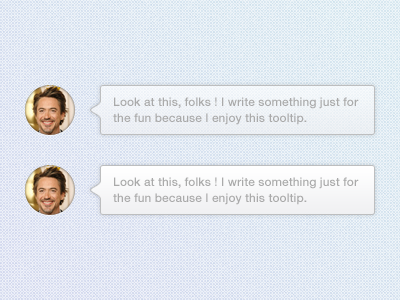
<style>
.page{position:relative;width:400px;height:300px}
.page>*{position:absolute;margin:0}
.t1{font:12px/16px "HelveticaNeue-Medium";color:#aaaaaa}
</style>
<div class="page">
<p class="t1" style="left:113px;top:97px;width:246px;height:28px">Look at this, folks ! I write something just for <br>the fun because I enjoy this tooltip.</p>
<p class="t1" style="left:113px;top:177px;width:246px;height:28px">Look at this, folks ! I write something just for <br>the fun because I enjoy this tooltip.</p>
</div>
